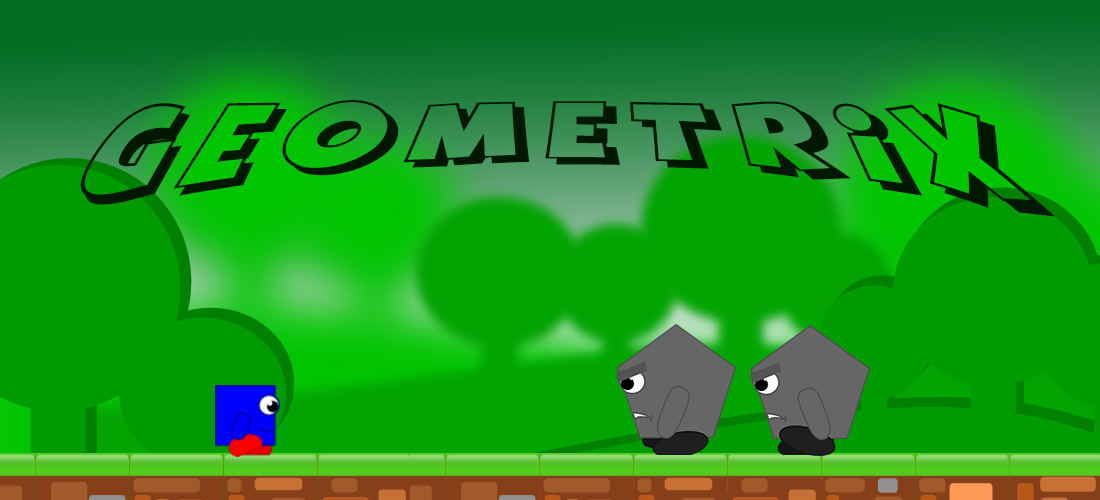
<style>
.page{position:relative;width:1100px;height:500px}
.page>*{position:absolute;margin:0}
.t1{font:100px "AgentRed";color:#001800}
</style>
<div class="page">
<p class="t1" style="left:80px;top:100px;width:975px;height:117px">GEOMETRIX</p>
</div>
